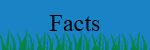
<style>
.page{position:relative;width:150px;height:50px;background:#1883c5}
.page>*{position:absolute;margin:0}
.t1{font:24px "TimesNewRomanPSMT";color:#000000}
</style>
<div class="page">
<p class="t1" style="left:49px;top:15px;width:51px;height:16px">Facts</p>
</div>
